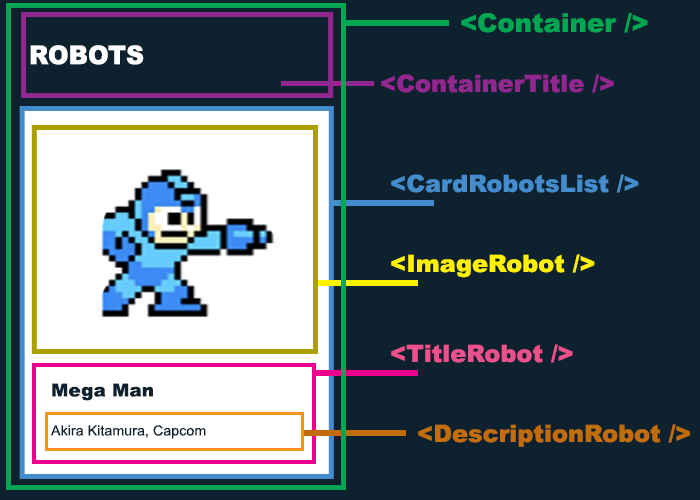
<style>
.page{position:relative;width:700px;height:500px;background:#0e212e}
.page>*{position:absolute;margin:0}
.t1{font:26px "Arial-Black";color:#00a651}
.t2{font:25.8px "Arial-Black";color:#ffffff;scale:0.97 1}
.t3{font:24px "Arial-Black";color:#92278f}
.t4{font:24px "Arial-Black";color:#448ccb}
.t5{font:24px "Arial-Black";color:#fff200}
.t6{font:24px "Arial-Black";color:#ec518c}
.t7{font:18px "Arial-Black";color:#0e212e}
.t8{font:14px "ArialMT";color:#0e212e}
.t9{font:24px "Arial-Black";color:#c16d09}
</style>
<div class="page">
<p class="t1" style="left:461px;top:13px;width:187px;height:20px">&lt;Container /&gt;</p>
<p class="t2" style="left:30px;top:45px;width:114px;height:20px">ROBOTS</p>
<p class="t3" style="left:381px;top:74px;width:233px;height:19px">&lt;ContainerTitle /&gt;</p>
<p class="t4" style="left:391px;top:174px;width:248px;height:19px">&lt;CardRobotsList /&gt;</p>
<p class="t5" style="left:391px;top:254px;width:204px;height:24px">&lt;ImageRobot /&gt;</p>
<p class="t6" style="left:391px;top:344px;width:182px;height:19px">&lt;TitleRobot /&gt;</p>
<p class="t7" style="left:52px;top:383px;width:101px;height:18px">Mega Man</p>
<p class="t8" style="left:50px;top:425px;width:156px;height:14px">Akira Kitamura, Capcom</p>
<p class="t9" style="left:418px;top:424px;width:272px;height:23px">&lt;DescriptionRobot /&gt;</p>
</div>
